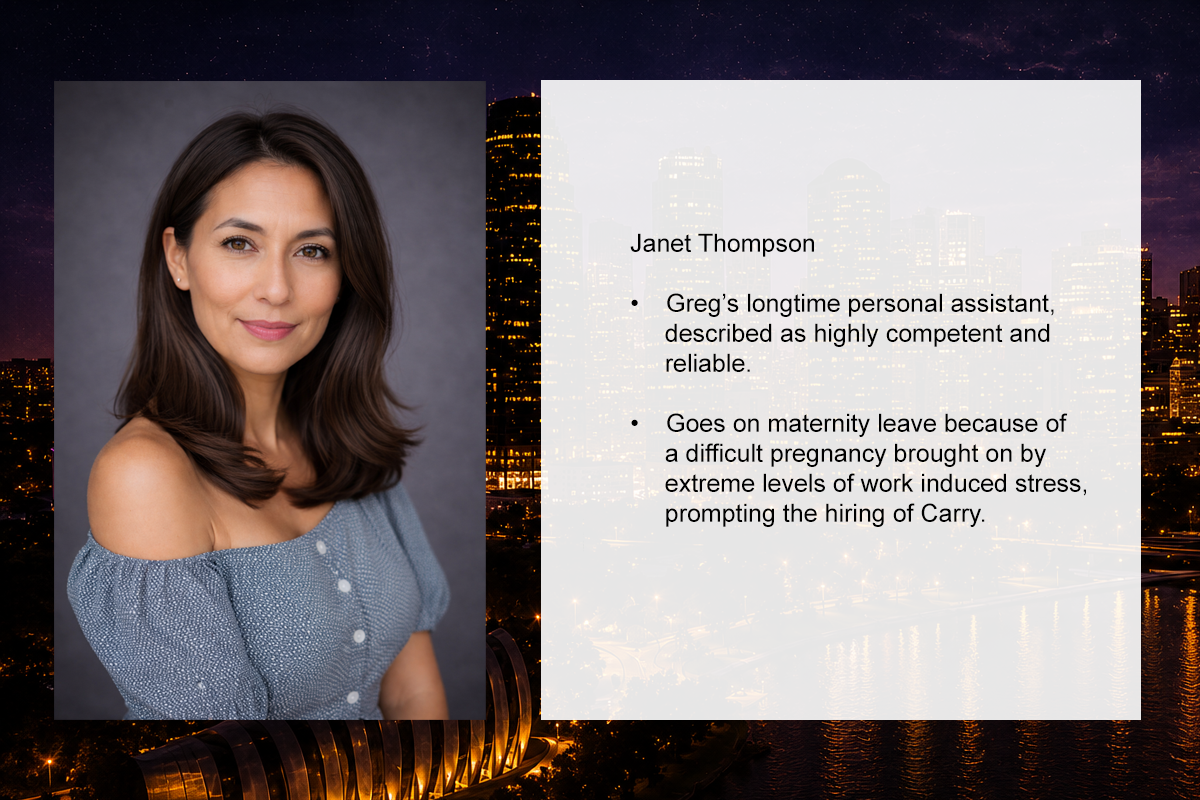
<style>
.page{position:relative;width:1200px;height:800px}
.page>*{position:absolute;margin:0}
.t1{font:25px "ArialMT";color:#000000}
</style>
<div class="page">
<p class="t1" style="left:630px;top:233px;width:456px;height:294px">Janet Thompson<br><br>• Greg’s longtime personal assistant, <br>     described as highly competent and <br>     reliable.<br><br>• Goes on maternity leave because of <br>     a difficult pregnancy brought on by <br>     extreme levels of work induced stress, <br>     prompting the hiring of Carry.</p>
</div>
